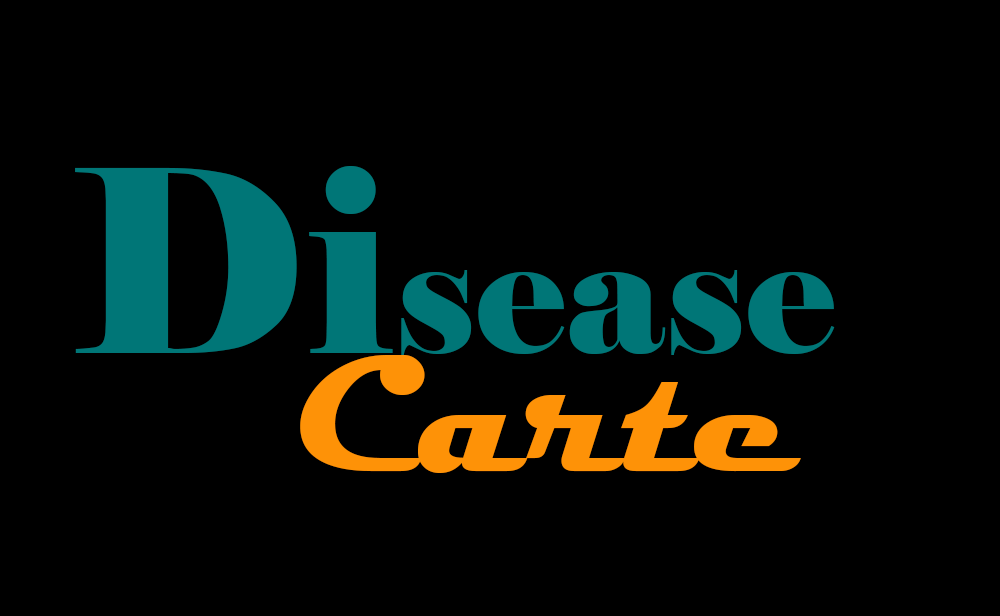
<style>
.page{position:relative;width:1000px;height:616px;background:#000000}
.page>*{position:absolute;margin:0}
.t1{font:169.3px "Elephant-Regular";color:#007677}
.t2{font:254px "Elephant-Regular";color:#007677}
.t3{font:169.3px "Magneto-Bold";color:#fe9207}
</style>
<div class="page">
<p class="t1" style="left:75px;top:165px;width:760px;height:190px"><span class="t2">Di</span>sease</p>
<p class="t3" style="left:300px;top:355px;width:501px;height:118px">Carte</p>
</div>
